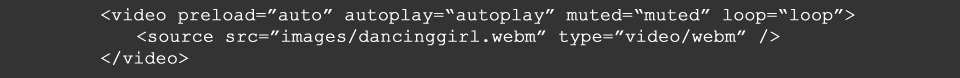
<style>
.page{position:relative;width:960px;height:78px;background:#333333}
.page>*{position:absolute;margin:0}
.t1{font:18px "CourierNewPSMT";letter-spacing:-0.01em;color:#ffffff;font-weight:bold}
</style>
<div class="page">
<p class="t1" style="left:101px;top:8px;width:754px;height:57px">&lt;video preload=”auto” autoplay=“autoplay” muted=“muted” loop=“loop”&gt;<br> &lt;source src=”images/dancinggirl.webm” type=”video/webm” /&gt;<br>&lt;/video&gt;</p>
</div>
